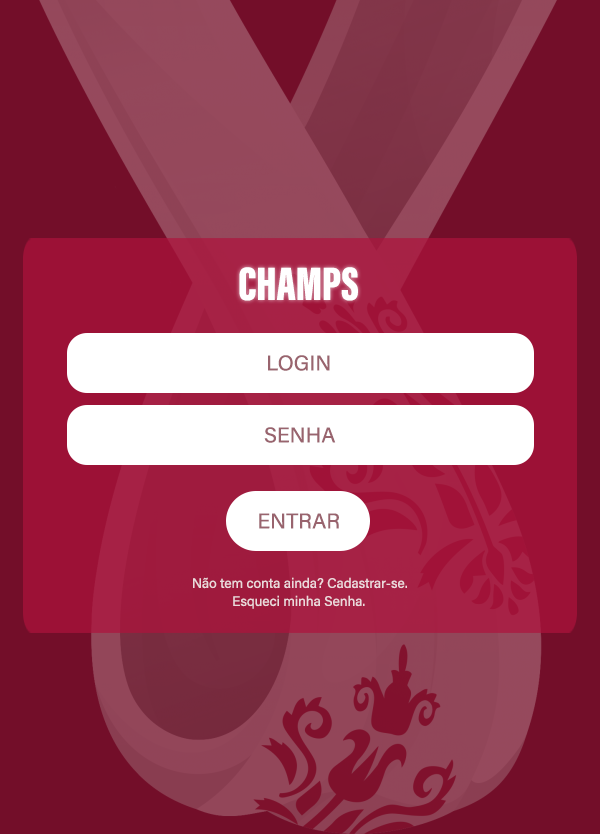
<style>
.page{position:relative;width:600px;height:834px;background:#730e29}
.page>*{position:absolute;margin:0}
.t1{font:48.2px "AcuminConcept-ExtraCondensedBlack";color:#ffffff}
.t2{font:21.4px "AcuminConcept-Regular";color:#99646e}
.t3{font:13.7px "AcuminConcept-Regular";color:#ecd8dc}
</style>
<div class="page">
<p class="t1" style="left:239px;top:267px;width:119px;height:34px">CHAMPS</p>
<p class="t2" style="left:268px;top:355px;width:62px;height:16px">LOGIN</p>
<p class="t2" style="left:264px;top:427px;width:72px;height:16px">SENHA</p>
<p class="t2" style="left:259px;top:513px;width:80px;height:16px">ENTRAR</p>
<p class="t3" style="left:193px;top:577px;width:214px;height:12px">Não tem conta ainda? Cadastrar-se.</p>
<p class="t3" style="left:233px;top:595px;width:132px;height:14px">Esqueci minha Senha.</p>
</div>
